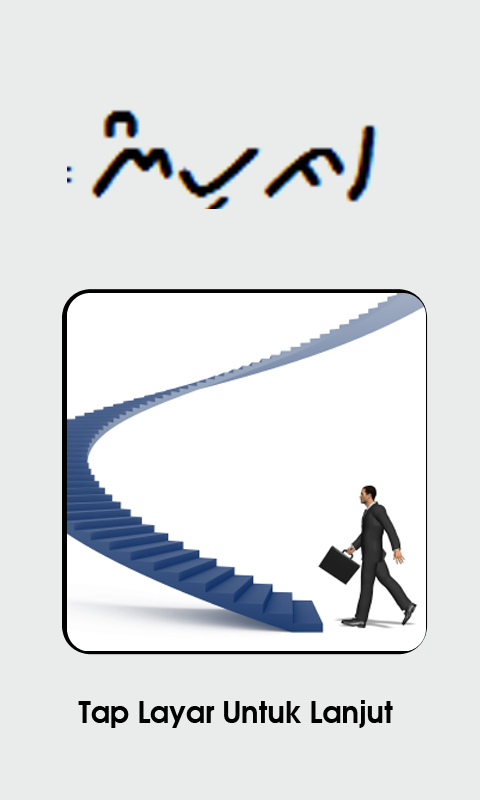
<style>
.page{position:relative;width:480px;height:800px;background:#eaeceb}
.page>*{position:absolute;margin:0}
.t1{font:29px "AvantGarde-Demi";color:#000000}
</style>
<div class="page">
<p class="t1" style="left:78px;top:700px;width:315px;height:28px">Tap Layar Untuk Lanjut</p>
</div>
